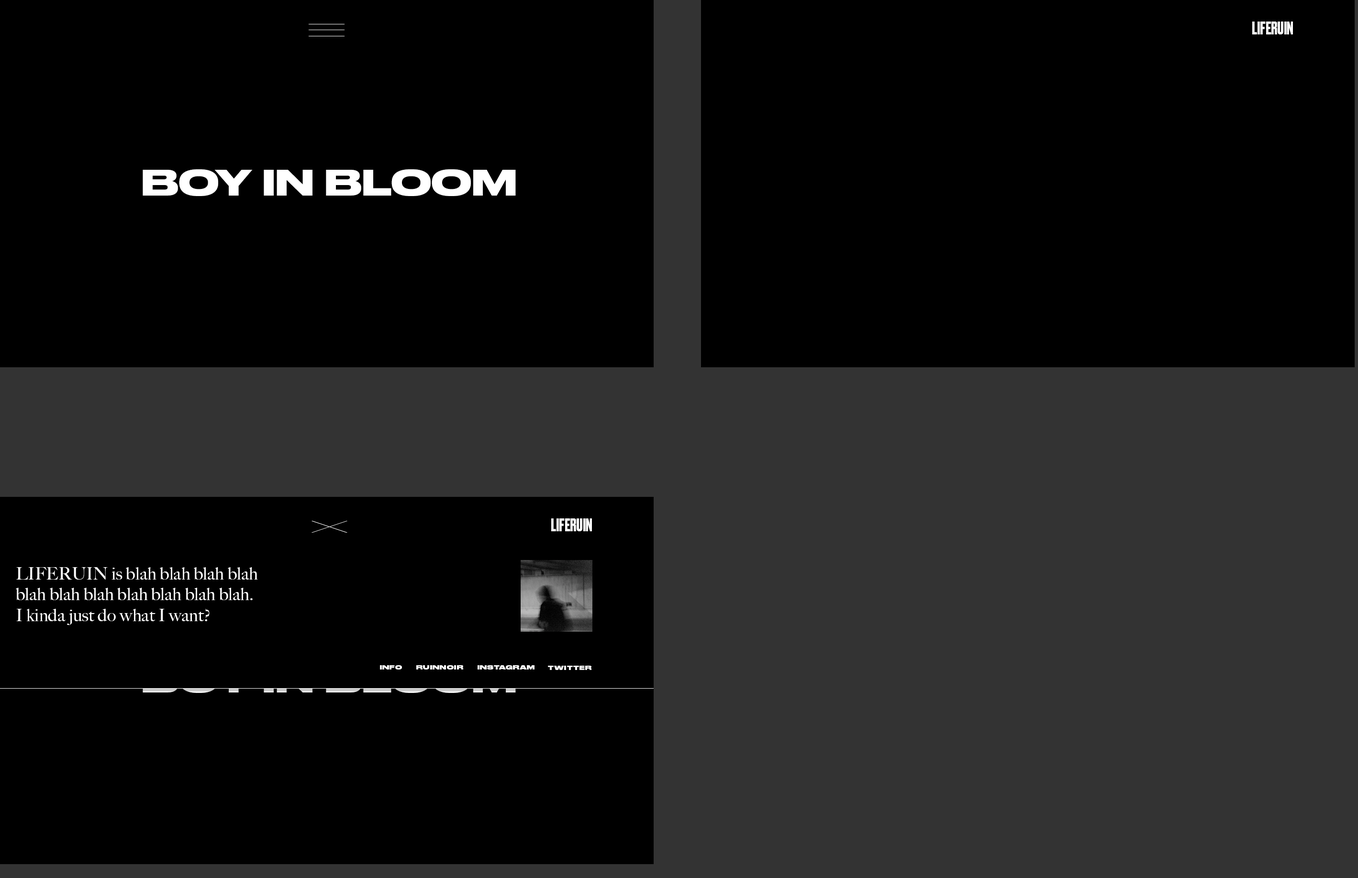
<style>
.page{position:relative;width:1358px;height:878px;background:#000000}
.page>*{position:absolute;margin:0}
.t1{font:17.2px "Druk-Bold";color:#ffffff}
.t2{font:34.4px "DrukWide-Bold";color:#ffffff}
.t3{font:17.2px "BigCaslon-Medium";color:#ffffff}
.t4{font:5.7px "DrukWide-Heavy";letter-spacing:0.06em;color:#ffffff}
</style>
<div class="page">
<p class="t1" style="left:1252px;top:22px;width:41px;height:12px">LIFERUIN</p>
<p class="t2" style="left:143px;top:169px;width:373px;height:27px">BOY IN BLOOM</p>
<p class="t1" style="left:551px;top:519px;width:41px;height:12px">LIFERUIN</p>
<p class="t3" style="left:16px;top:567px;width:242px;height:58px">LIFERUIN is blah blah blah blah<br>blah blah blah blah blah blah blah.<br>I kinda just do what I want?</p>
<p class="t4" style="left:380px;top:665px;width:22px;height:5px">iNFO</p>
<p class="t4" style="left:416px;top:665px;width:48px;height:5px">RUINNOIR</p>
<p class="t4" style="left:477px;top:665px;width:57px;height:5px">INSTAGRAM</p>
<p class="t4" style="left:548px;top:666px;width:44px;height:4px">TWITTER</p>
</div>
